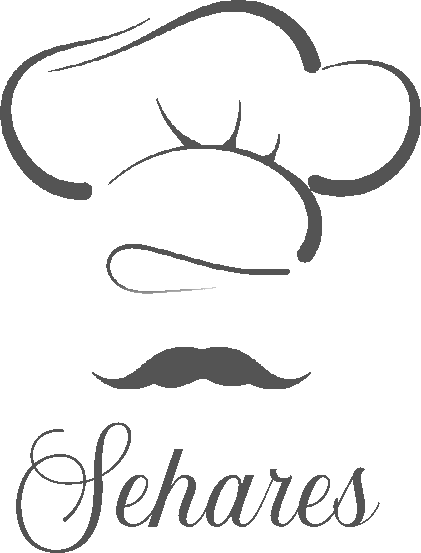
<style>
.page{position:relative;width:421px;height:553px;background:#ffffff}
.page>*{position:absolute;margin:0}
.t1{font:104.3px "NovaQuintaPERSONALUSE-Regular";color:#545454}
</style>
<div class="page">
<p class="t1" style="left:16px;top:422px;width:364px;height:131px">Sehares</p>
</div>
